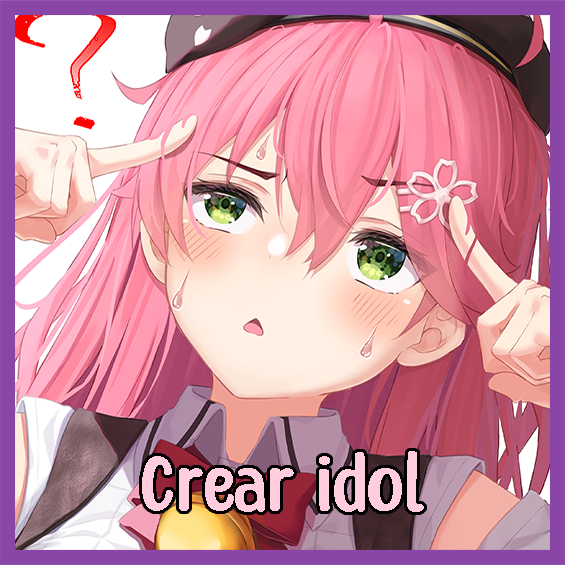
<style>
.page{position:relative;width:565px;height:565px}
.page>*{position:absolute;margin:0}
.t1{font:86.1px "HoneyNotes-Regular";color:#ffcddd;scale:1.16 1}
</style>
<div class="page">
<p class="t1" style="left:142px;top:451px;width:282px;height:61px">Crear idol</p>
</div>
